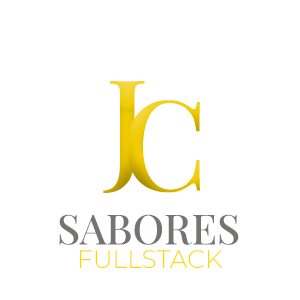
<style>
.page{position:relative;width:300px;height:300px;background:#ffffff}
.page>*{position:absolute;margin:0}
.t1{font:125px "PlayfairDisplay-Medium"}
.t2{font:41.7px "PlayfairDisplay-Medium";color:#787373}
.t3{font:25px "Montserrat-Light";color:#ffd700}
</style>
<div class="page">
<p class="t1" style="left:103px;top:81px;width:42px;height:112px">J</p>
<p class="t2" style="left:59px;top:214px;width:180px;height:31px">SABORES</p>
<p class="t3" style="left:80px;top:250px;width:143px;height:19px">FULLSTACK</p>
</div>
